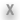
<style>
.page{position:relative;width:20px;height:20px}
.page>*{position:absolute;margin:0}
.t1{font:15.6px "Ubuntu-Bold";color:#929292;scale:0.77 1}
</style>
<div class="page">
<p class="t1" style="left:6px;top:4px;width:8px;height:12px">X</p>
</div>
